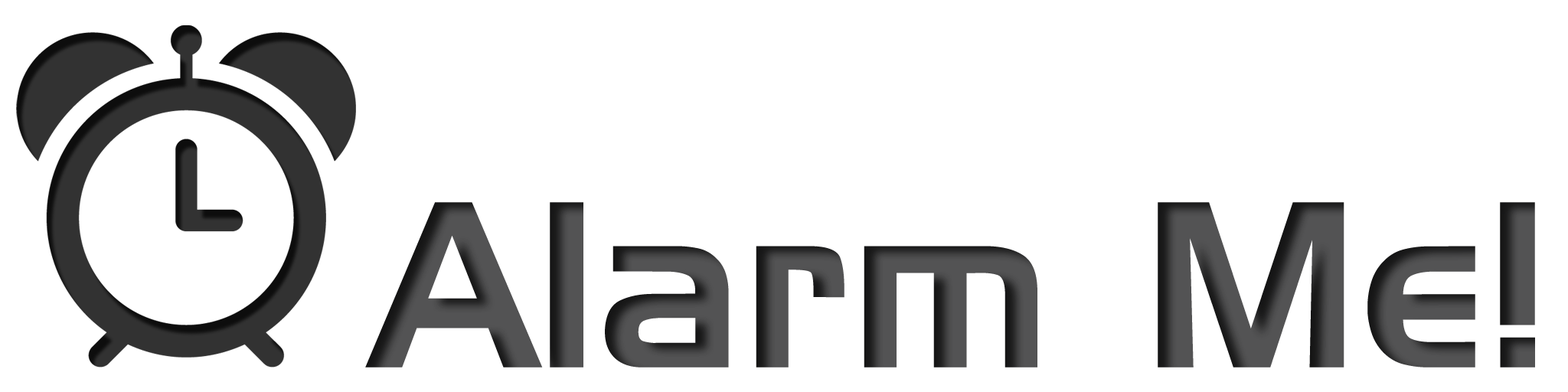
<style>
.page{position:relative;width:1568px;height:392px;background:#ffffff}
.page>*{position:absolute;margin:0}
.t1{font:229.7px "HandelGothic";color:#404041}
</style>
<div class="page">
<p class="t1" style="left:365px;top:202px;width:1170px;height:166px">Alarm Me!</p>
</div>
